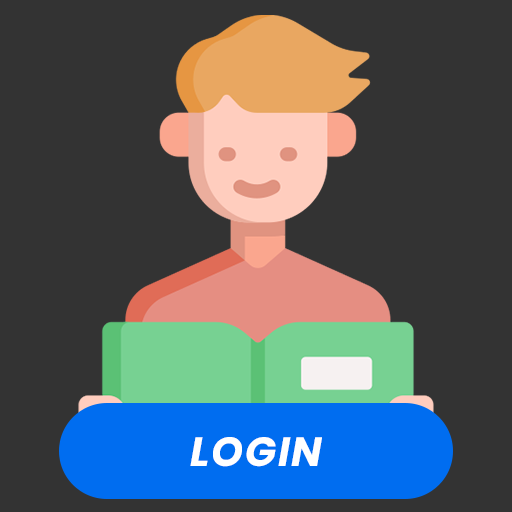
<style>
.page{position:relative;width:512px;height:512px;background:#333333}
.page>*{position:absolute;margin:0}
.t1{font:40.8px "Poppins-BoldItalic";letter-spacing:0.04em;color:#ffffff}
</style>
<div class="page">
<p class="t1" style="left:190px;top:437px;width:132px;height:30px">LOGIN</p>
</div>
